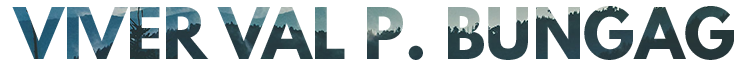
<style>
.page{position:relative;width:750px;height:70px;background:#ffffff}
.page>*{position:absolute;margin:0}
.t1{font:62.5px "LeagueSpartan-Bold"}
</style>
<div class="page">
<p class="t1" style="left:12px;top:6px;width:722px;height:54px">VIVER VAL P. BUNGAG</p>
</div>
